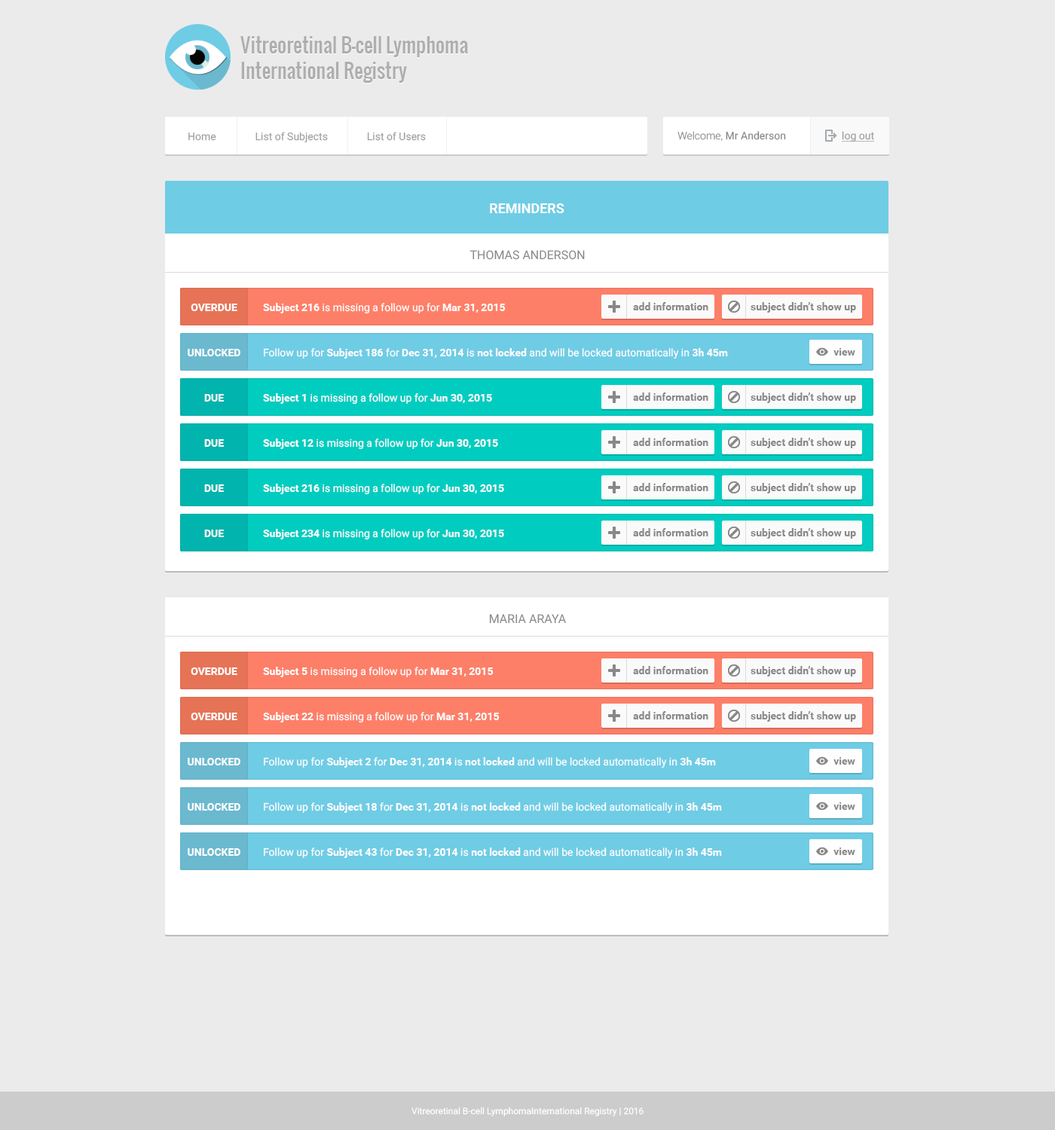
<style>
.page{position:relative;width:1055px;height:1130px;background:#ebebeb}
.page>*{position:absolute;margin:0}
.t1{font:19.6px/25.6px "Oswald-Regular";color:#aeaeae}
.t2{font:10.5px "Roboto-Regular";color:#a0a0a0}
.t3{font:10.5px "Roboto-Regular";color:#888888}
.t4{font:10.5px "Roboto-Light";color:#888888}
.t5{font:10.5px "Roboto-Regular";color:#a0a0a0;text-decoration:underline}
.t6{font:13.6px "Roboto-Bold";color:#ffffff;text-transform:uppercase}
.t7{font:12.1px "Roboto-Regular";color:#888888;text-transform:uppercase}
.t8{font:10.5px "Roboto-Bold";color:#ffffff;text-transform:uppercase}
.t9{font:10.5px "Roboto-Regular";color:#fefefe}
.t10{font:10.5px "Roboto-Bold";color:#fefefe}
.t11{font:10.5px "Roboto-Bold";color:#888888}
.t12{font:9px "Roboto-Regular";color:#ffffff}
</style>
<div class="page">
<p class="t1" style="left:240px;top:37px;width:228px;height:47px">Vitreoretinal B-cell Lymphoma<br>International Registry</p>
<p class="t1" style="left:240px;top:36px;width:228px;height:47px">Vitreoretinal B-cell Lymphoma<br>International Registry</p>
<p class="t2" style="left:188px;top:132px;width:238px;height:11px">Home               List of Subjects               List of Users</p>
<p class="t3" style="left:677px;top:131px;width:109px;height:10px"><span class="t4">Welcome, </span>Mr Anderson</p>
<p class="t5" style="left:842px;top:131px;width:32px;height:11px">log out</p>
<p class="t6" style="left:490px;top:203px;width:74px;height:10px">REMINDERS</p>
<p class="t7" style="left:470px;top:250px;width:115px;height:10px">THOMAS ANDERSON</p>
<p class="t8" style="left:191px;top:304px;width:46px;height:7px">overdue</p>
<p class="t9" style="left:263px;top:303px;width:243px;height:11px"><span class="t10">Subject 216</span> is missing a follow up for<span class="t10"> Mar 31, 2015</span></p>
<p class="t11" style="left:633px;top:302px;width:75px;height:8px">add information</p>
<p class="t11" style="left:751px;top:302px;width:105px;height:11px">subject didn’t show up</p>
<p class="t8" style="left:188px;top:349px;width:52px;height:7px">Unlocked</p>
<p class="t9" style="left:264px;top:348px;width:464px;height:11px">Follow up for <span class="t10">Subject 186</span> for <span class="t10">Dec 31, 2014</span> is <span class="t10">not locked</span> and will be locked automatically in <span class="t10">3h 45m</span></p>
<p class="t11" style="left:833px;top:348px;width:22px;height:8px">view</p>
<p class="t8" style="left:204px;top:394px;width:20px;height:8px">Due</p>
<p class="t9" style="left:263px;top:393px;width:229px;height:12px"><span class="t10">Subject 1</span> is missing a follow up for<span class="t10"> Jun 30, 2015</span></p>
<p class="t11" style="left:633px;top:393px;width:75px;height:8px">add information</p>
<p class="t11" style="left:751px;top:393px;width:105px;height:10px">subject didn’t show up</p>
<p class="t11" style="left:633px;top:438px;width:75px;height:8px">add information</p>
<p class="t11" style="left:751px;top:438px;width:105px;height:10px">subject didn’t show up</p>
<p class="t8" style="left:204px;top:439px;width:20px;height:8px">Due</p>
<p class="t9" style="left:263px;top:439px;width:235px;height:11px"><span class="t10">Subject 12 </span>is missing a follow up for<span class="t10"> Jun 30, 2015</span></p>
<p class="t8" style="left:204px;top:485px;width:20px;height:7px">Due</p>
<p class="t9" style="left:263px;top:484px;width:241px;height:11px"><span class="t10">Subject 216</span> is missing a follow up for<span class="t10"> Jun 30, 2015</span></p>
<p class="t11" style="left:633px;top:483px;width:75px;height:8px">add information</p>
<p class="t11" style="left:751px;top:483px;width:105px;height:11px">subject didn’t show up</p>
<p class="t8" style="left:204px;top:530px;width:20px;height:7px">Due</p>
<p class="t9" style="left:263px;top:529px;width:241px;height:11px"><span class="t10">Subject 234</span> is missing a follow up for<span class="t10"> Jun 30, 2015</span></p>
<p class="t11" style="left:633px;top:528px;width:75px;height:9px">add information</p>
<p class="t11" style="left:751px;top:528px;width:105px;height:11px">subject didn’t show up</p>
<p class="t7" style="left:489px;top:614px;width:77px;height:10px">MARIA ARAYA</p>
<p class="t8" style="left:191px;top:668px;width:46px;height:7px">overdue</p>
<p class="t9" style="left:263px;top:667px;width:231px;height:11px"><span class="t10">Subject 5</span> is missing a follow up for<span class="t10"> Mar 31, 2015</span></p>
<p class="t11" style="left:633px;top:666px;width:75px;height:8px">add information</p>
<p class="t11" style="left:751px;top:666px;width:105px;height:11px">subject didn’t show up</p>
<p class="t8" style="left:191px;top:713px;width:46px;height:7px">overdue</p>
<p class="t9" style="left:263px;top:712px;width:237px;height:11px"><span class="t10">Subject 22</span> is missing a follow up for<span class="t10"> Mar 31, 2015</span></p>
<p class="t11" style="left:633px;top:711px;width:75px;height:9px">add information</p>
<p class="t11" style="left:751px;top:711px;width:105px;height:11px">subject didn’t show up</p>
<p class="t8" style="left:188px;top:758px;width:52px;height:8px">Unlocked</p>
<p class="t9" style="left:264px;top:757px;width:452px;height:12px">Follow up for <span class="t10">Subject 2</span> for <span class="t10">Dec 31, 2014</span> is <span class="t10">not locked</span> and will be locked automatically in <span class="t10">3h 45m</span></p>
<p class="t11" style="left:833px;top:757px;width:22px;height:8px">view</p>
<p class="t8" style="left:188px;top:803px;width:52px;height:8px">Unlocked</p>
<p class="t9" style="left:264px;top:803px;width:458px;height:11px">Follow up for <span class="t10">Subject 18 </span>for <span class="t10">Dec 31, 2014</span> is <span class="t10">not locked</span> and will be locked automatically in <span class="t10">3h 45m</span></p>
<p class="t11" style="left:833px;top:803px;width:22px;height:7px">view</p>
<p class="t8" style="left:188px;top:848px;width:52px;height:8px">Unlocked</p>
<p class="t9" style="left:264px;top:848px;width:458px;height:11px">Follow up for <span class="t10">Subject 43</span> for <span class="t10">Dec 31, 2014</span> is <span class="t10">not locked</span> and will be locked automatically in <span class="t10">3h 45m</span></p>
<p class="t11" style="left:833px;top:848px;width:22px;height:7px">view</p>
<p class="t12" style="left:411px;top:1107px;width:233px;height:10px">Vitreoretinal B-cell LymphomaInternational Registry | 2016</p>
</div>
